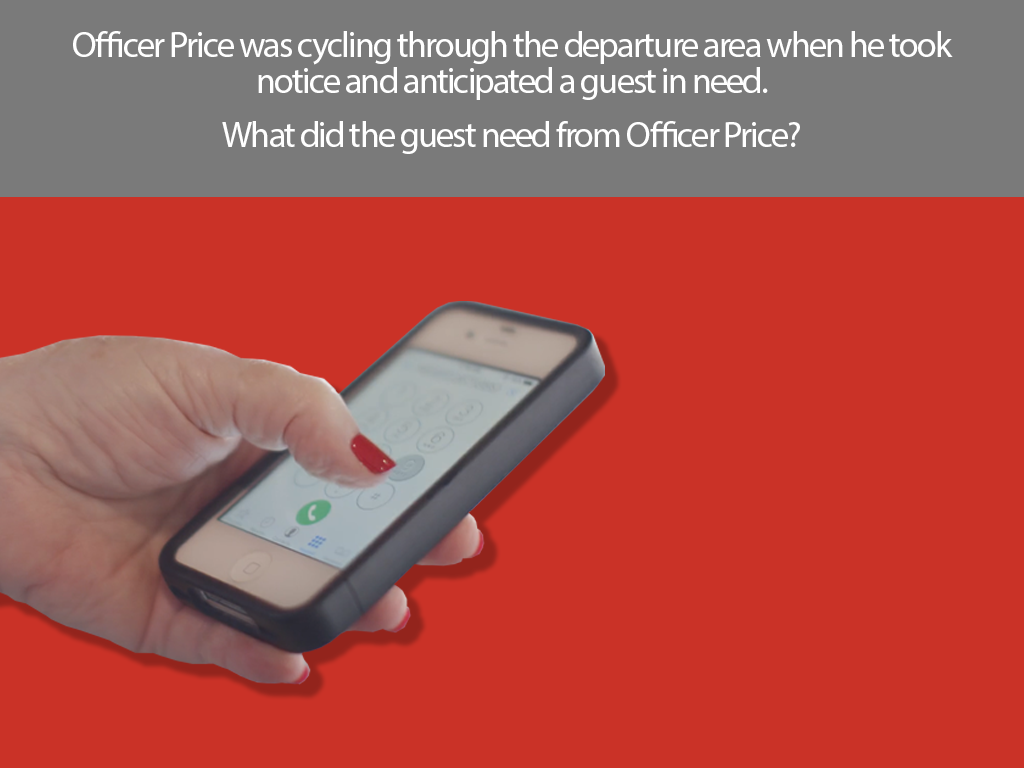
<style>
.page{position:relative;width:1024px;height:768px;background:#ca3227}
.page>*{position:absolute;margin:0}
.t1{font:36px/36px "MyriadPro-Regular";letter-spacing:-0.05em;color:#ffffff}
</style>
<div class="page">
<p class="t1" style="left:73px;top:31px;width:880px;height:123px;text-align:center">Officer Price was cycling through the departure area when he took notice and anticipated a guest in need. <br><br>What did the guest need from Officer Price?</p>
</div>
